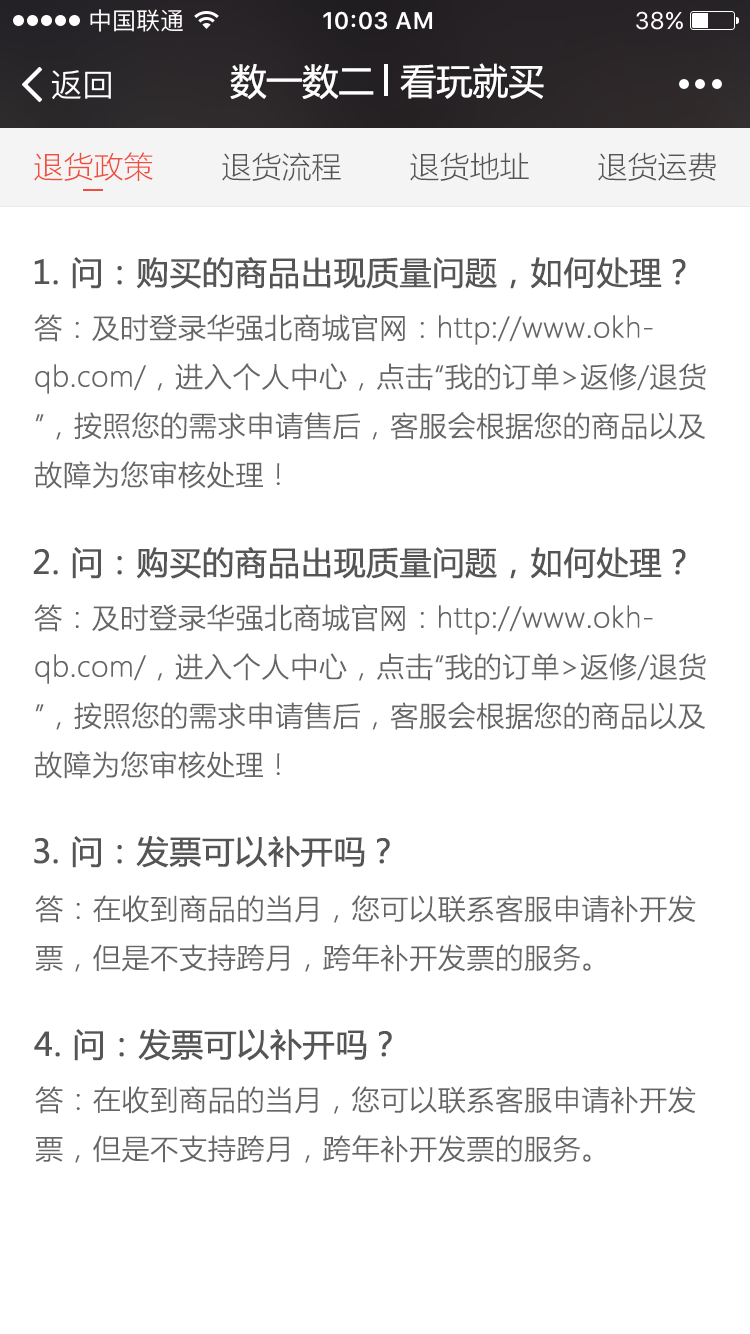
<style>
.page{position:relative;width:750px;height:1334px;background:#ffffff}
.page>*{position:absolute;margin:0}
.t1{font:36px "MicrosoftYaHei";color:#ffffff}
.t2{font:30px "MicrosoftYaHeiLight";color:#ef4f3e}
.t3{font:30px "MicrosoftYaHeiLight";color:#555555}
.t4{font:32px "MicrosoftYaHei";color:#555555;font-weight:bold}
.t5{font:28px "MicrosoftYaHeiLight";color:#666666;font-weight:bold}
</style>
<div class="page">
<p class="t1" style="left:230px;top:63px;width:144px;height:37px">数一数二</p>
<p class="t1" style="left:400px;top:63px;width:144px;height:36px">看玩就买</p>
<p class="t2" style="left:34px;top:152px;width:119px;height:29px">退货政策</p>
<p class="t3" style="left:222px;top:152px;width:119px;height:29px">退货流程</p>
<p class="t3" style="left:410px;top:152px;width:119px;height:29px">退货地址</p>
<p class="t3" style="left:598px;top:152px;width:118px;height:29px">退货运费</p>
<p class="t4" style="left:34px;top:256px;width:652px;height:33px">1. 问：购买的商品出现质量问题，如何处理？</p>
<p class="t5" style="left:34px;top:314px;width:672px;height:175px">答：及时登录华强北商城官网：http://www.okhqb.com/，进入个人中心，点击“我的订单&gt;返修/退货”，按照您的需求申请售后，客服会根据您的商品以及故障为您审核处理！</p>
<p class="t4" style="left:33px;top:546px;width:653px;height:33px">2. 问：购买的商品出现质量问题，如何处理？</p>
<p class="t5" style="left:34px;top:604px;width:672px;height:175px">答：及时登录华强北商城官网：http://www.okhqb.com/，进入个人中心，点击“我的订单&gt;返修/退货”，按照您的需求申请售后，客服会根据您的商品以及故障为您审核处理！</p>
<p class="t4" style="left:34px;top:836px;width:356px;height:32px">3. 问：发票可以补开吗？</p>
<p class="t5" style="left:35px;top:895px;width:661px;height:77px">答：在收到商品的当月，您可以联系客服申请补开发票，但是不支持跨月，跨年补开发票的服务。</p>
<p class="t4" style="left:34px;top:1029px;width:358px;height:32px">4. 问：发票可以补开吗？</p>
<p class="t5" style="left:35px;top:1086px;width:661px;height:77px">答：在收到商品的当月，您可以联系客服申请补开发票，但是不支持跨月，跨年补开发票的服务。</p>
</div>
